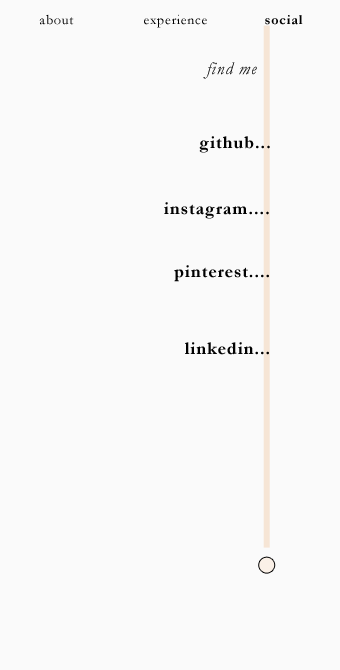
<style>
.page{position:relative;width:340px;height:670px;background:#fafafa}
.page>*{position:absolute;margin:0}
.t1{font:14px "Garamond";letter-spacing:0.05em;color:#010101}
.t2{font:14px "Garamond-Bold";letter-spacing:0.05em;color:#010101}
.t3{font:18px "Garamond-Italic";letter-spacing:0.05em}
.t4{font:18px "Garamond-Bold";letter-spacing:0.05em;color:#010101}
</style>
<div class="page">
<p class="t1" style="left:39px;top:14px;width:35px;height:11px">about</p>
<p class="t1" style="left:144px;top:14px;width:63px;height:14px">experience</p>
<p class="t2" style="left:265px;top:15px;width:38px;height:10px">social</p>
<p class="t3" style="left:203px;top:62px;width:54px;height:17px">find me</p>
<p class="t4" style="left:199px;top:136px;width:71px;height:17px">github...</p>
<p class="t4" style="left:164px;top:202px;width:105px;height:17px">instagram....</p>
<p class="t4" style="left:174px;top:265px;width:95px;height:17px">pinterest....</p>
<p class="t4" style="left:185px;top:342px;width:84px;height:13px">linkedin...</p>
</div>
